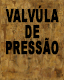
<style>
.page{position:relative;width:64px;height:80px}
.page>*{position:absolute;margin:0}
.t1{font:18px/16px "Arial-Black";color:#000000;text-transform:uppercase;font-weight:bold;scale:0.55 1}
</style>
<div class="page">
<p class="t1" style="left:5px;top:5px;width:54px;height:50px;text-align:center">VALVÚLA<br> DE<br> PRESSÃO</p>
</div>
